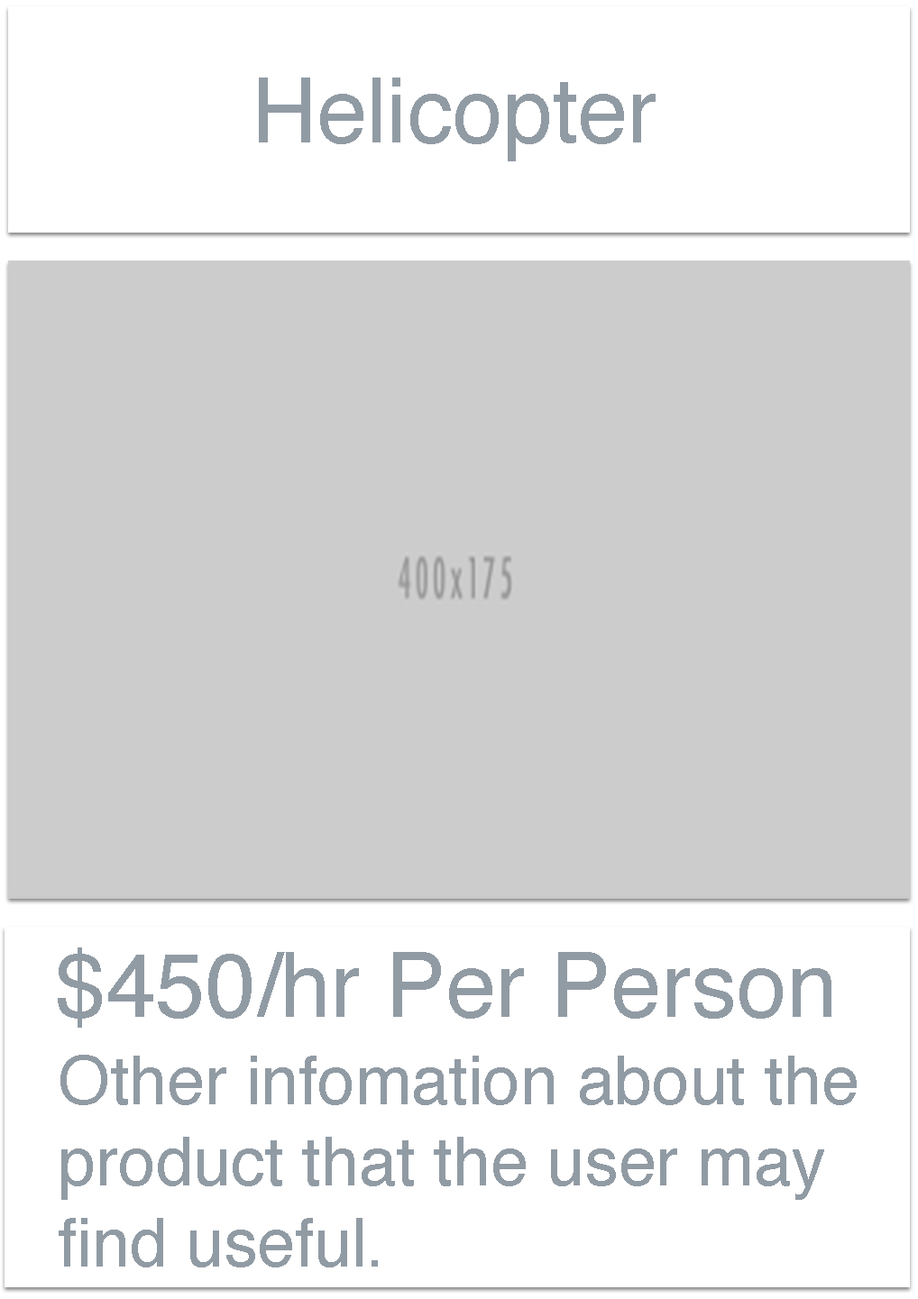
<style>
.page{position:relative;width:918px;height:1299px;background:#cccccc}
.page>*{position:absolute;margin:0}
.t1{font:90.2px "Helvetica";color:#919ba4}
.t2{font:67.6px "Helvetica";color:#919ba4}
</style>
<div class="page">
<p class="t1" style="left:259px;top:78px;width:396px;height:83px">Helicopter</p>
<p class="t1" style="left:58px;top:948px;width:773px;height:80px">$450/hr Per Person</p>
<p class="t2" style="left:59px;top:1055px;width:798px;height:213px">Other infomation about the <br>product that the user may<br>find useful.</p>
</div>
